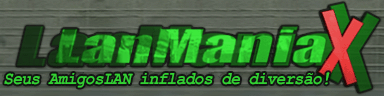
<style>
.page{position:relative;width:384px;height:96px}
.page>*{position:absolute;margin:0}
.t1{font:18px "CourierNewPS-BoldItalicMT";letter-spacing:-0.02em;color:#33d133;scale:0.87 1}
</style>
<div class="page">
<p class="t1" style="left:4px;top:72px;width:326px;height:16px">Seus AmigosLAN inflados de diversão!</p>
</div>
